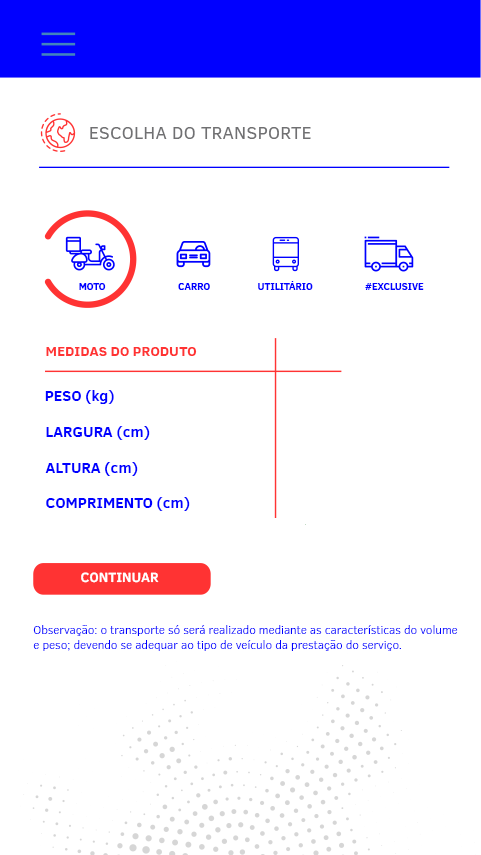
<style>
.page{position:relative;width:481px;height:855px;background:#ffffff}
.page>*{position:absolute;margin:0}
.t1{font:17.7px "ClearSans";letter-spacing:0.02em;color:#707072}
.t2{font:10px "ClearSans-Bold";color:#0000ff}
.t3{font:14.3px "ClearSans-Bold";color:#ff3333}
.t4{font:15.1px "ClearSans-Bold";color:#0000ff}
.t5{font:13.8px "ClearSans-Bold";color:#ffffff}
.t6{font:11.8px/15.2px "ClearSans-Light";color:#0000ff}
</style>
<div class="page">
<p class="t1" style="left:90px;top:127px;width:221px;height:12px">ESCOLHA DO TRANSPORTE</p>
<p class="t2" style="left:258px;top:281px;width:55px;height:9px">UTILITÁRIO</p>
<p class="t2" style="left:79px;top:283px;width:27px;height:7px">MOTO</p>
<p class="t2" style="left:178px;top:283px;width:32px;height:7px">CARRO</p>
<p class="t2" style="left:365px;top:283px;width:59px;height:7px">#EXCLUSIVE</p>
<p class="t3" style="left:46px;top:347px;width:151px;height:9px">MEDIDAS DO PRODUTO</p>
<p class="t4" style="left:45px;top:390px;width:69px;height:14px">PESO (kg)</p>
<p class="t4" style="left:46px;top:426px;width:104px;height:14px">LARGURA (cm)</p>
<p class="t4" style="left:45px;top:462px;width:93px;height:14px">ALTURA (cm)</p>
<p class="t4" style="left:46px;top:497px;width:144px;height:14px">COMPRIMENTO (cm)</p>
<p class="t5" style="left:81px;top:572px;width:78px;height:11px">CONTINUAR</p>
<p class="t6" style="left:33px;top:625px;width:425px;height:26px">Observação: o transporte só será realizado mediante as características do volume<br>e peso; devendo se adequar ao tipo de veículo da prestação do serviço.</p>
</div>
